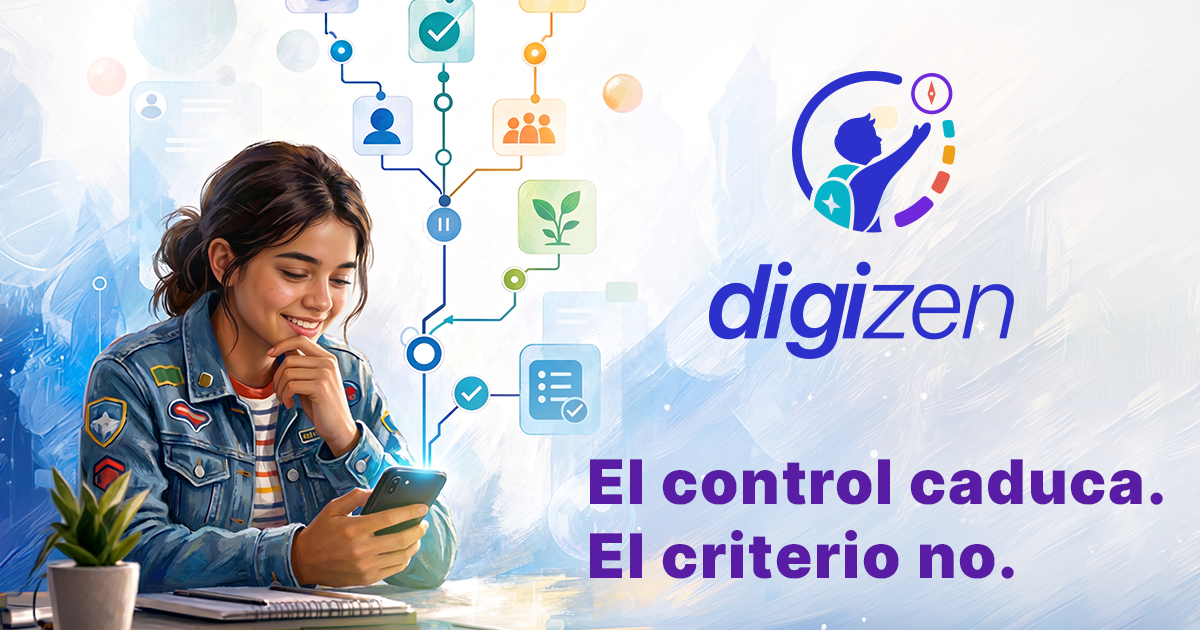
<style>
.page{position:relative;width:1200px;height:630px}
.page>*{position:absolute;margin:0}
.t1{font:61.4px "Inter-Black";letter-spacing:0.03em;color:#591ca5}
</style>
<div class="page">
<p class="t1" style="left:590px;top:459px;width:573px;height:120px">El control caduca.<br> El criterio no.</p>
</div>
